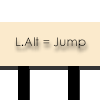
<style>
.page{position:relative;width:100px;height:100px;background:#ffffff}
.page>*{position:absolute;margin:0}
.t1{font:12px "CenturyGothic";color:#000000}
</style>
<div class="page">
<p class="t1" style="left:16px;top:37px;width:70px;height:12px">L.Alt = Jump</p>
</div>
